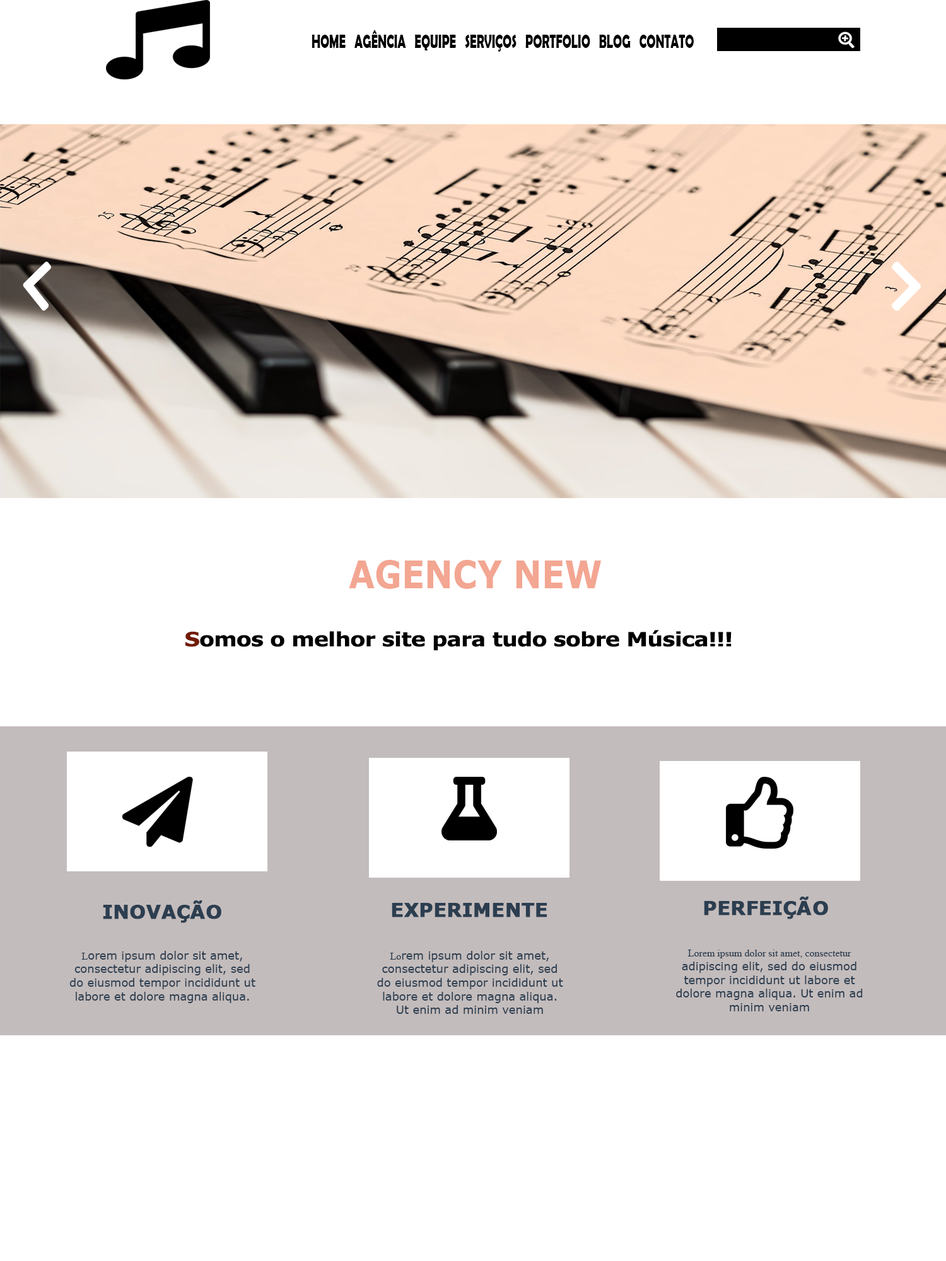
<style>
.page{position:relative;width:946px;height:1261px;background:#ffffff}
.page>*{position:absolute;margin:0}
.t1{font:19.8px "BerlinSansFBDemi-Bold";color:#010101;scale:0.6 1}
.t2{font:38.4px "Verdana-Bold";color:#f3a692;scale:0.87 1}
.t3{font:19.8px "Tahoma-Bold";color:#000000;scale:1.19 1}
.t4{font:19.8px "Tahoma-Bold";color:#721b04;scale:1.19 1}
.t5{font:18.9px "Verdana-Bold";color:#2c3e50;text-transform:uppercase;font-weight:bold}
.t6{font:11.3px "Verdana";color:#2c3e50}
.t7{font:10.1px "TimesNewRomanPSMT";color:#2c3e50}
.t8{font:11.3px "MS-Gothic";color:#2c3e50}
</style>
<div class="page">
<p class="t1" style="left:311px;top:30px;width:383px;height:22px">HOME   AGÊNCIA   EQUIPE   SERVIÇOS   PORTFOLIO   BLOG   CONTATO</p>
<p class="t2" style="left:349px;top:560px;width:252px;height:29px">AGENCY NEW</p>
<p class="t3" style="left:185px;top:630px;width:546px;height:21px"><span class="t4">      S</span>omos o melhor site para tudo sobre Música!!!</p>
<p class="t5" style="left:103px;top:900px;width:118px;height:23px">Inovação</p>
<p class="t5" style="left:392px;top:903px;width:155px;height:14px">EXPERIMENTE</p>
<p class="t5" style="left:704px;top:897px;width:124px;height:22px">PERFEIÇÃO</p>
<p class="t6" style="left:69px;top:951px;width:186px;height:52px;text-align:center"><span class="t7">L</span>orem ipsum dolor sit amet, consectetur adipiscing elit, sed do eiusmod tempor incididunt ut labore et dolore magna aliqua. Ut enim ad <span class="t8">minim veniam</span></p>
<p class="t6" style="left:377px;top:951px;width:186px;height:63px;text-align:center"><span class="t7">Lo</span>rem ipsum dolor sit amet, consectetur adipiscing elit, sed do eiusmod tempor incididunt ut labore et dolore magna aliqua. Ut enim ad minim veniam</p>
<p class="t6" style="left:676px;top:949px;width:186px;height:62px;text-align:center"><span class="t7">Lorem ipsum dolor sit amet, consectetur </span>adipiscing elit, sed do eiusmod tempor incididunt ut labore et dolore magna aliqua. Ut enim ad minim veniam</p>
</div>
